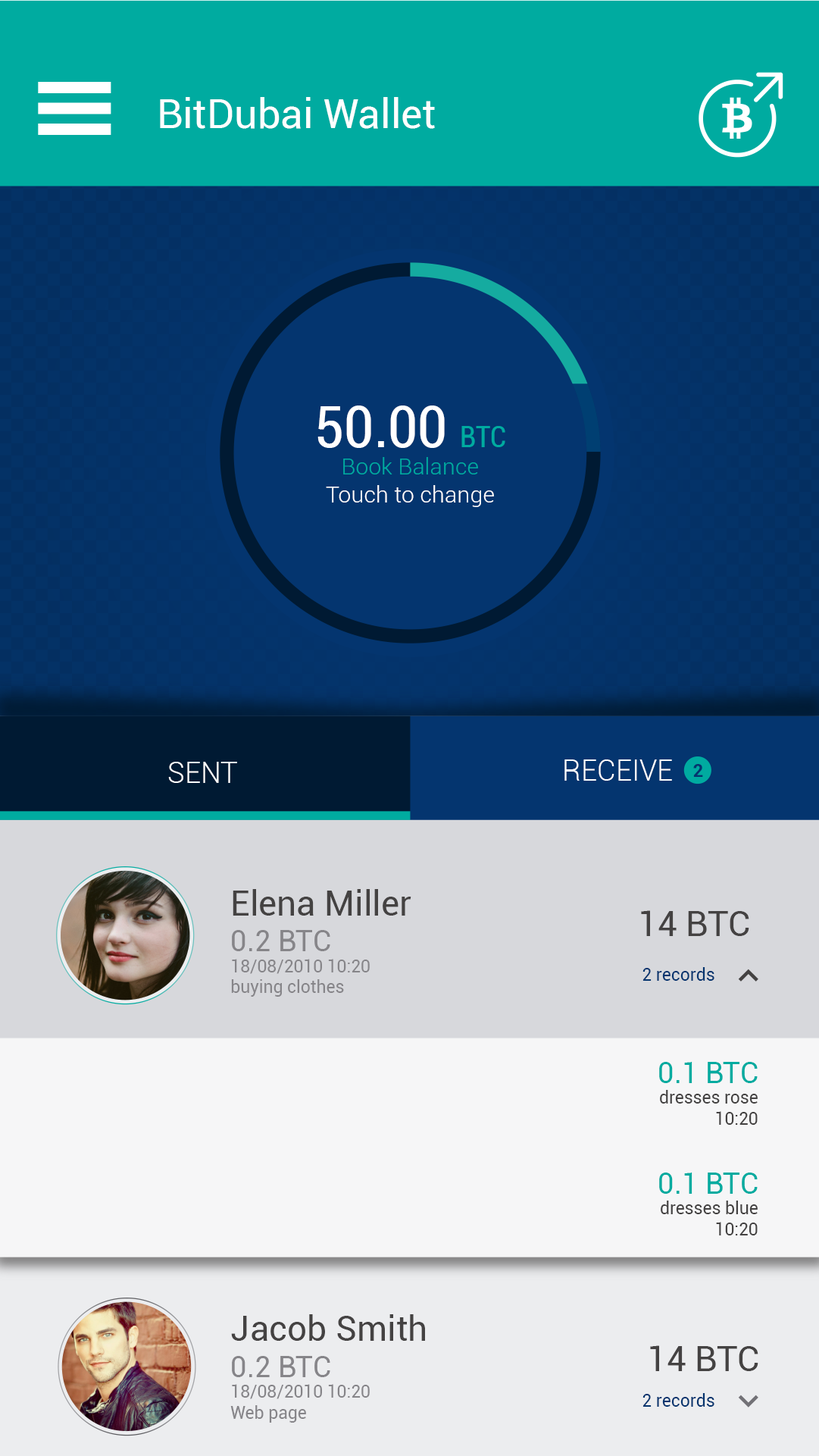
<style>
.page{position:relative;width:819px;height:1456px}
.page>*{position:absolute;margin:0}
.t1{font:40.8px "Roboto-Regular";color:#ffffff}
.t2{font:23.1px "Roboto-Light";color:#ffffff}
.t3{font:57.7px "Roboto-Condensed";color:#ffffff}
.t4{font:28.8px "Roboto-Condensed";color:#00aba0}
.t5{font:23.1px "Roboto-Light";color:#00aba0}
.t6{font:28.8px "Roboto-Light";color:#ffffff}
.t7{font:18.2px "Roboto-Bold";color:#04356f}
.t8{font:34.9px "Roboto-Regular";color:#444242}
.t9{font:17.3px "Roboto-Regular";color:#868589}
.t10{font:28.8px "Roboto-Regular";color:#868589}
.t11{font:17.4px "Roboto-Regular";color:#04356f}
.t12{font:17.3px "Roboto-Regular";color:#444242}
.t13{font:28.8px "Roboto-Regular";color:#00aba0}
</style>
<div class="page">
<p class="t1" style="left:160px;top:97px;width:275px;height:32px">BitDubai Wallet</p>
<p class="t2" style="left:318px;top:405px;width:187px;height:102px;text-align:center"><span class="t3">50.00 </span><span class="t4">BTC<br></span><span class="t5">Book Balance<br></span>Touch to change</p>
<p class="t6" style="left:168px;top:762px;width:69px;height:21px">SENT</p>
<p class="t6" style="left:565px;top:759px;width:107px;height:22px">RECEIVE</p>
<p class="t7" style="left:693px;top:764px;width:10px;height:13px">2</p>
<p class="t8" style="left:233px;top:889px;width:178px;height:26px">Elena Miller</p>
<p class="t8" style="left:641px;top:910px;width:108px;height:26px">14 BTC</p>
<p class="t9" style="left:231px;top:930px;width:139px;height:66px"><span class="t10">0.2 BTC<br></span>18/08/2010 10:20<br>buying clothes</p>
<p class="t11" style="left:643px;top:967px;width:72px;height:14px">2 records</p>
<p class="t12" style="left:659px;top:1062px;width:99px;height:63px;text-align:right"><span class="t13">0.1 BTC<br></span>dresses rose<br>10:20</p>
<p class="t12" style="left:659px;top:1172px;width:99px;height:63px;text-align:right"><span class="t13">0.1 BTC<br></span>dresses blue<br>10:20</p>
<p class="t8" style="left:231px;top:1314px;width:194px;height:27px">Jacob Smith</p>
<p class="t8" style="left:650px;top:1345px;width:109px;height:26px">14 BTC</p>
<p class="t9" style="left:230px;top:1356px;width:140px;height:66px"><span class="t10">0.2 BTC<br></span>18/08/2010 10:20<br>Web page</p>
<p class="t11" style="left:643px;top:1393px;width:72px;height:13px">2 records</p>
</div>
